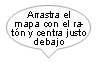
<style>
.page{position:relative;width:98px;height:63px;background:#ffffff}
.page>*{position:absolute;margin:0}
.t1{font:10px/9px "ArialMT";letter-spacing:-0.025em;color:#000000}
</style>
<div class="page">
<p class="t1" style="left:11px;top:11px;width:75px;height:36px;text-align:center">Arrastra el<br>mapa con el ra-<br>tón y centra justo<br>debajo</p>
</div>
